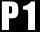
<style>
.page{position:relative;width:40px;height:32px;background:#000000}
.page>*{position:absolute;margin:0}
.t1{font:40px "GENUINE";letter-spacing:0.07em;color:#ffffff}
</style>
<div class="page">
<p class="t1" style="left:1px;top:1px;width:34px;height:29px">P1</p>
</div>
